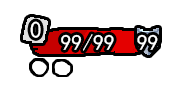
<style>
.page{position:relative;width:175px;height:89px;background:#ffffff}
.page>*{position:absolute;margin:0}
.t1{font:23.2px "SimHei";color:#ffffff;text-transform:uppercase}
.t2{font:21.6px "SimHei";color:#ffffff;text-transform:uppercase}
</style>
<div class="page">
<p class="t1" style="left:30px;top:21px;width:11px;height:17px">0</p>
<p class="t2" style="left:61px;top:34px;width:53px;height:17px">99/99</p>
<p class="t2" style="left:137px;top:34px;width:21px;height:16px">99</p>
</div>
